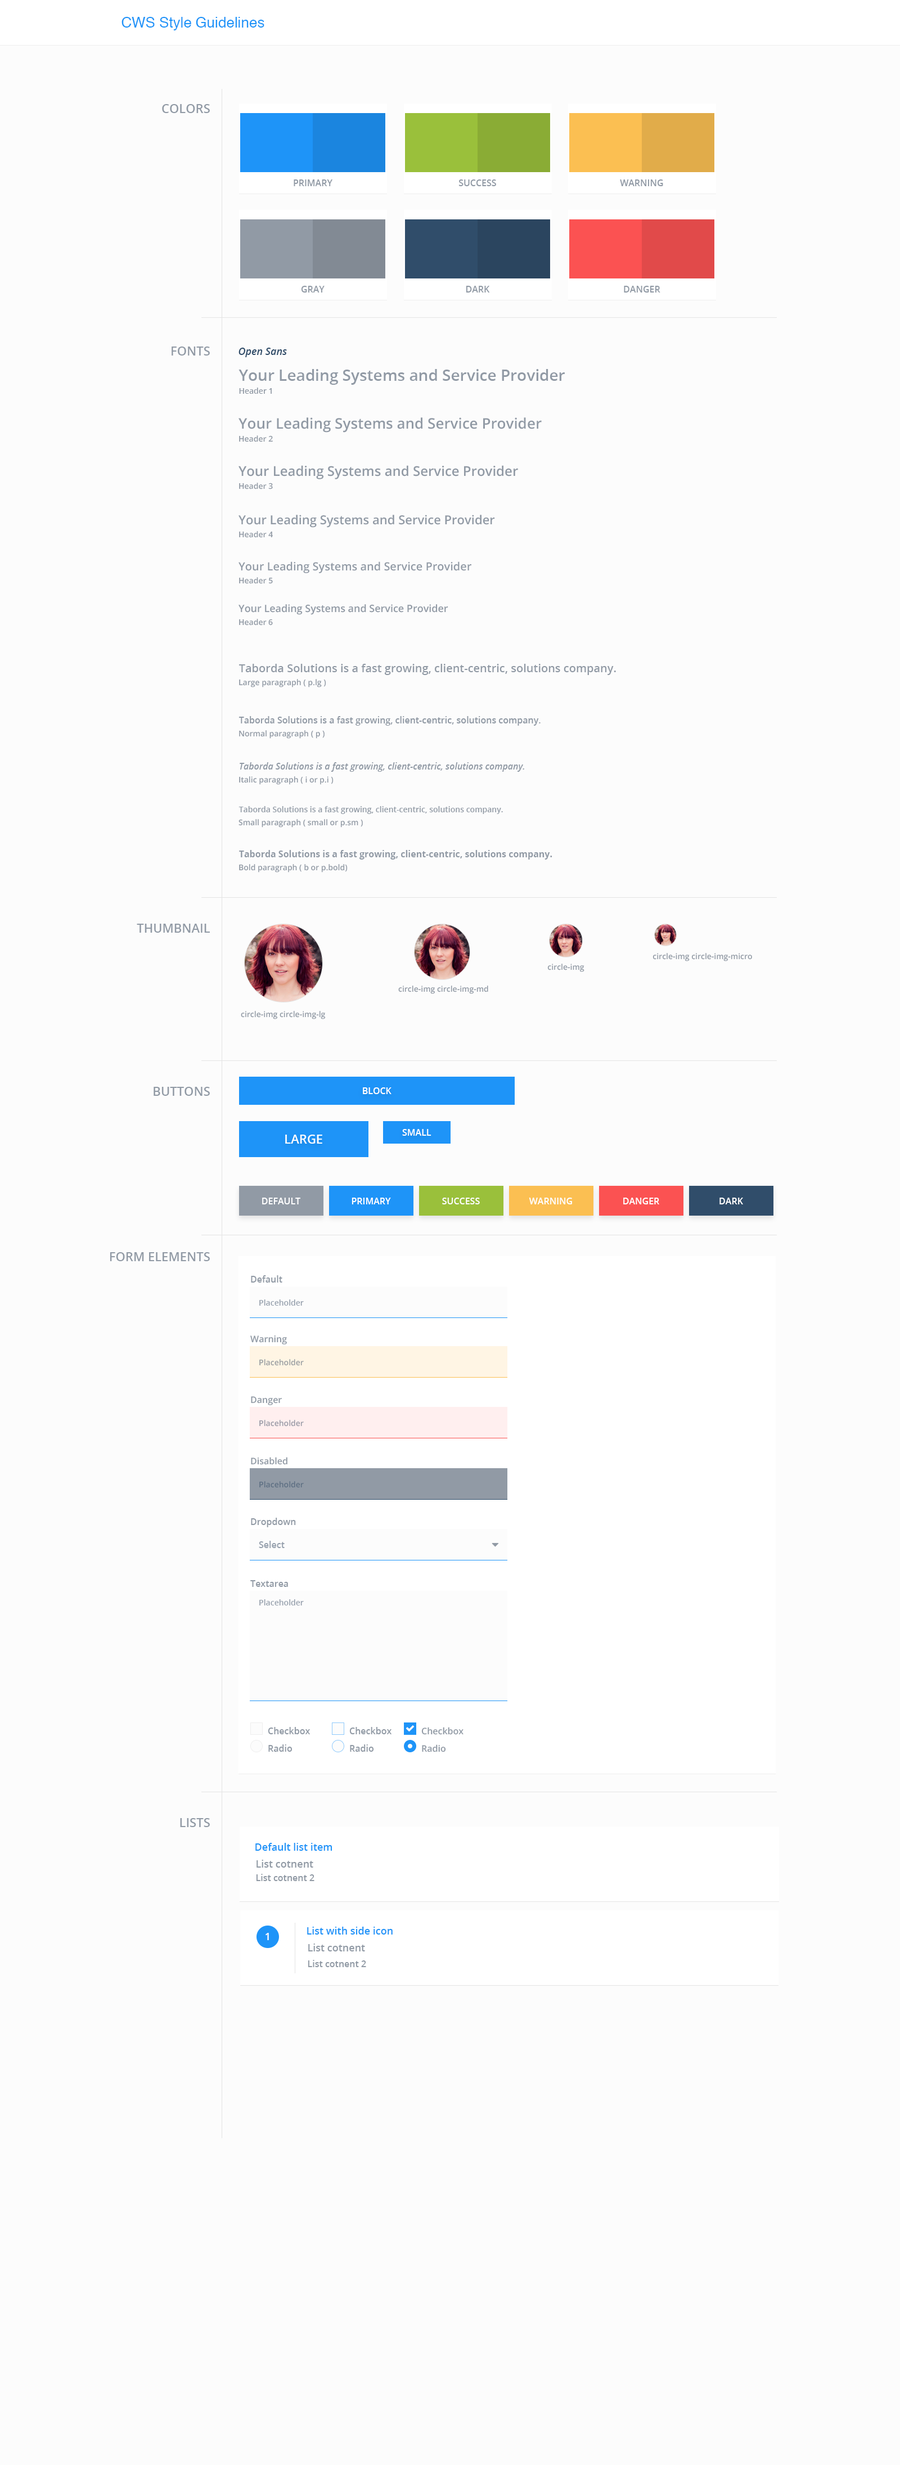
<style>
.page{position:relative;width:900px;height:2465px;background:#fcfcfc}
.page>*{position:absolute;margin:0}
.t1{font:14.6px "Helvetica";color:#1e94f8}
.t2{font:12.4px "OpenSans-Semibold";color:#919aa5}
.t3{font:9px "OpenSans-Semibold";color:#919aa5;text-transform:uppercase}
.t4{font:10.1px "OpenSans-SemiboldItalic";color:#304d6a}
.t5{font:15.8px "OpenSans-Semibold";color:#919aa5}
.t6{font:7.9px "OpenSans-Semibold";color:#919aa5}
.t7{font:14.6px "OpenSans-Semibold";color:#919aa5}
.t8{font:13.5px "OpenSans-Semibold";color:#919aa5}
.t9{font:11.2px "OpenSans-Semibold";color:#919aa5}
.t10{font:10.1px "OpenSans-Semibold";color:#919aa5}
.t11{font:9px "OpenSans-Semibold";color:#919aa5}
.t12{font:9px "OpenSans-SemiboldItalic";color:#919aa5}
.t13{font:9px "OpenSans-Bold";color:#919aa5}
.t14{font:9px "OpenSans-Semibold";color:#ffffff;text-transform:uppercase}
.t15{font:12.4px "OpenSans-Semibold";color:#ffffff;text-transform:uppercase}
.t16{font:7.9px "OpenSans-Semibold";color:#97a1ae}
.t17{font:7.9px "OpenSans-Semibold";color:#999ea2}
.t18{font:7.9px "OpenSans-Semibold";color:#999ba7}
.t19{font:7.9px "OpenSans-Semibold";color:#5e7083}
.t20{font:9px "OpenSans-Semibold";color:#97a1ae}
.t21{font:10.1px "OpenSans-Semibold";color:#1e94f8}
.t22{font:10.1px "OpenSans-Semibold";color:#ffffff}
</style>
<div class="page">
<p class="t1" style="left:122px;top:17px;width:142px;height:13px">CWS Style Guidelines</p>
<p class="t2" style="left:162px;top:104px;width:48px;height:9px">COLORS</p>
<p class="t3" style="left:294px;top:179px;width:38px;height:7px">Primary</p>
<p class="t3" style="left:458px;top:179px;width:38px;height:7px">Success</p>
<p class="t3" style="left:620px;top:179px;width:43px;height:7px">Warning</p>
<p class="t3" style="left:301px;top:286px;width:24px;height:6px">Gray</p>
<p class="t3" style="left:466px;top:286px;width:24px;height:6px">Dark</p>
<p class="t3" style="left:624px;top:286px;width:36px;height:6px">Danger</p>
<p class="t2" style="left:172px;top:346px;width:38px;height:10px">FONTS</p>
<p class="t4" style="left:238px;top:348px;width:49px;height:9px">Open Sans</p>
<p class="t5" style="left:238px;top:369px;width:327px;height:16px">Your Leading Systems and Service Provider</p>
<p class="t6" style="left:239px;top:388px;width:33px;height:6px">Header 1</p>
<p class="t7" style="left:238px;top:417px;width:304px;height:16px">Your Leading Systems and Service Provider</p>
<p class="t6" style="left:239px;top:435px;width:34px;height:7px">Header 2</p>
<p class="t8" style="left:238px;top:465px;width:280px;height:14px">Your Leading Systems and Service Provider</p>
<p class="t6" style="left:239px;top:483px;width:34px;height:6px">Header 3</p>
<p class="t2" style="left:238px;top:515px;width:257px;height:13px">Your Leading Systems and Service Provider</p>
<p class="t6" style="left:239px;top:531px;width:34px;height:7px">Header 4</p>
<p class="t9" style="left:238px;top:561px;width:233px;height:12px">Your Leading Systems and Service Provider</p>
<p class="t6" style="left:239px;top:577px;width:34px;height:7px">Header 5</p>
<p class="t10" style="left:238px;top:604px;width:210px;height:11px">Your Leading Systems and Service Provider</p>
<p class="t6" style="left:239px;top:619px;width:34px;height:7px">Header 6</p>
<p class="t9" style="left:239px;top:664px;width:377px;height:11px">Taborda Solutions is a fast growing, client-centric, solutions company.</p>
<p class="t6" style="left:239px;top:679px;width:87px;height:8px">Large paragraph ( p.lg )</p>
<p class="t11" style="left:238px;top:716px;width:303px;height:10px">Taborda Solutions is a fast growing, client-centric, solutions company.</p>
<p class="t6" style="left:239px;top:730px;width:86px;height:9px">Normal paragraph ( p )</p>
<p class="t12" style="left:240px;top:762px;width:284px;height:10px">Taborda Solutions is a fast growing, client-centric, solutions company.</p>
<p class="t6" style="left:239px;top:776px;width:95px;height:9px">Italic paragraph ( i or p.i )</p>
<p class="t6" style="left:238px;top:806px;width:265px;height:8px">Taborda Solutions is a fast growing, client-centric, solutions company.</p>
<p class="t6" style="left:238px;top:819px;width:125px;height:8px">Small paragraph ( small or p.sm )</p>
<p class="t13" style="left:239px;top:850px;width:313px;height:10px">Taborda Solutions is a fast growing, client-centric, solutions company.</p>
<p class="t6" style="left:239px;top:864px;width:109px;height:8px">Bold paragraph ( b or p.bold)</p>
<p class="t2" style="left:137px;top:924px;width:73px;height:9px">THUMBNAIL</p>
<p class="t6" style="left:652px;top:953px;width:100px;height:8px">circle-img circle-img-micro</p>
<p class="t6" style="left:547px;top:964px;width:37px;height:8px">circle-img</p>
<p class="t6" style="left:398px;top:986px;width:90px;height:8px">circle-img circle-img-md</p>
<p class="t6" style="left:241px;top:1011px;width:85px;height:8px">circle-img circle-img-lg</p>
<p class="t2" style="left:154px;top:1087px;width:56px;height:9px">BUTTONS</p>
<p class="t14" style="left:363px;top:1087px;width:29px;height:7px">BLOCK</p>
<p class="t14" style="left:402px;top:1129px;width:29px;height:7px">SMALL</p>
<p class="t15" style="left:285px;top:1135px;width:37px;height:9px">LARGE</p>
<p class="t14" style="left:262px;top:1198px;width:38px;height:6px">Default</p>
<p class="t14" style="left:352px;top:1198px;width:39px;height:6px">Primary</p>
<p class="t14" style="left:442px;top:1198px;width:38px;height:6px">Success</p>
<p class="t14" style="left:529px;top:1198px;width:43px;height:6px">Warning</p>
<p class="t14" style="left:623px;top:1198px;width:36px;height:6px">Danger</p>
<p class="t14" style="left:719px;top:1198px;width:24px;height:6px">Dark</p>
<p class="t2" style="left:110px;top:1252px;width:100px;height:9px">FORM ELEMENTS</p>
<p class="t11" style="left:251px;top:1275px;width:31px;height:7px">Default</p>
<p class="t16" style="left:259px;top:1299px;width:45px;height:7px">Placeholder</p>
<p class="t11" style="left:250px;top:1335px;width:37px;height:9px">Warning</p>
<p class="t17" style="left:259px;top:1359px;width:45px;height:7px">Placeholder</p>
<p class="t11" style="left:251px;top:1396px;width:31px;height:9px">Danger</p>
<p class="t18" style="left:259px;top:1420px;width:45px;height:6px">Placeholder</p>
<p class="t11" style="left:251px;top:1457px;width:36px;height:8px">Disabled</p>
<p class="t19" style="left:259px;top:1481px;width:45px;height:7px">Placeholder</p>
<p class="t11" style="left:251px;top:1518px;width:45px;height:9px">Dropdown</p>
<p class="t20" style="left:259px;top:1541px;width:26px;height:7px">Select</p>
<p class="t11" style="left:250px;top:1580px;width:38px;height:7px">Textarea</p>
<p class="t16" style="left:259px;top:1599px;width:45px;height:6px">Placeholder</p>
<p class="t11" style="left:268px;top:1727px;width:42px;height:7px">Checkbox</p>
<p class="t11" style="left:349px;top:1727px;width:43px;height:7px">Checkbox</p>
<p class="t11" style="left:421px;top:1727px;width:43px;height:8px">Checkbox</p>
<p class="t11" style="left:268px;top:1744px;width:24px;height:8px">Radio</p>
<p class="t11" style="left:350px;top:1744px;width:24px;height:8px">Radio</p>
<p class="t11" style="left:422px;top:1744px;width:24px;height:8px">Radio</p>
<p class="t2" style="left:180px;top:1818px;width:30px;height:9px">LISTS</p>
<p class="t21" style="left:255px;top:1843px;width:77px;height:8px">Default list item</p>
<p class="t10" style="left:256px;top:1860px;width:57px;height:8px">List cotnent</p>
<p class="t11" style="left:256px;top:1874px;width:58px;height:7px">List cotnent 2</p>
<p class="t22" style="left:266px;top:1933px;width:3px;height:7px">1</p>
<p class="t21" style="left:307px;top:1927px;width:86px;height:7px">List with side icon</p>
<p class="t10" style="left:308px;top:1943px;width:57px;height:8px">List cotnent</p>
<p class="t11" style="left:308px;top:1960px;width:58px;height:7px">List cotnent 2</p>
</div>
